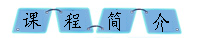
<style>
.page{position:relative;width:199px;height:38px;background:#ffffff}
.page>*{position:absolute;margin:0}
.t1{font:20.9px "KaiTi_GB2312";letter-spacing:0.05em;color:#000000;scale:0.86 1}
</style>
<div class="page">
<p class="t1" style="left:23px;top:12px;width:18px;height:17px">课</p>
<p class="t1" style="left:64px;top:13px;width:17px;height:17px">程</p>
<p class="t1" style="left:108px;top:12px;width:13px;height:19px">简</p>
<p class="t1" style="left:153px;top:13px;width:16px;height:19px">介</p>
</div>
